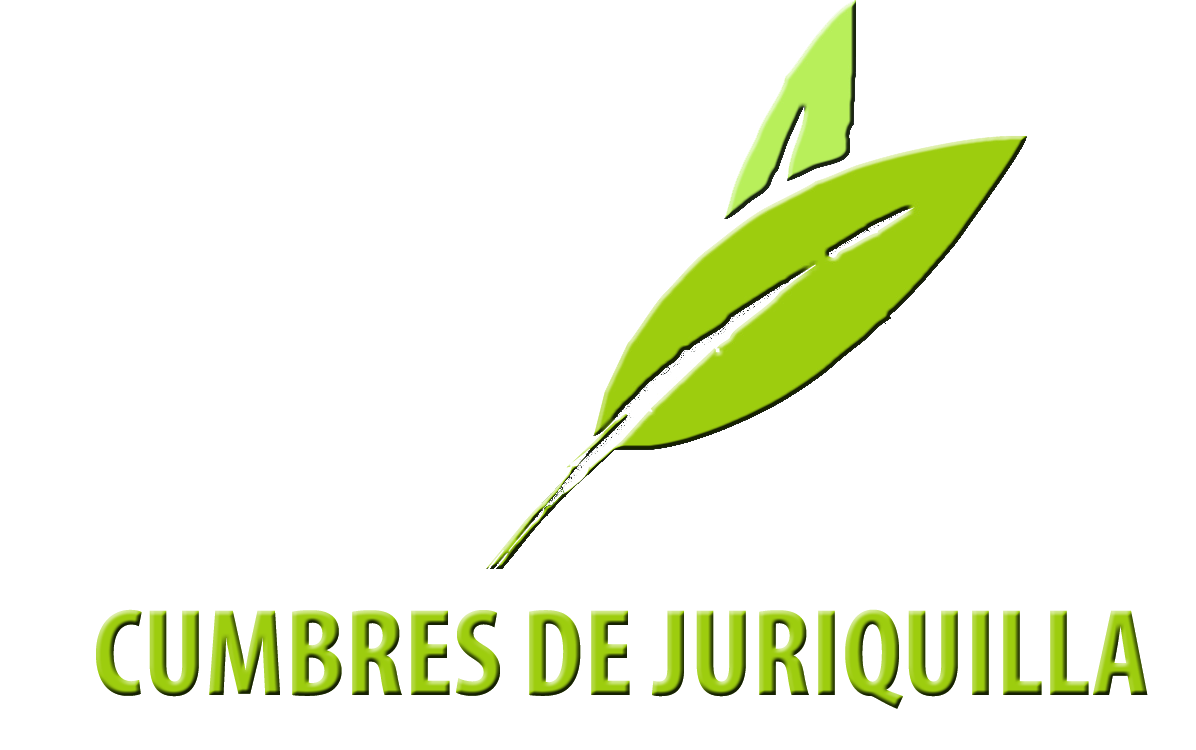
<style>
.page{position:relative;width:1196px;height:750px;background:#ffffff}
.page>*{position:absolute;margin:0}
.t1{font:125px "MyriadPro-BoldCond"}
</style>
<div class="page">
<p class="t1" style="left:96px;top:609px;width:1052px;height:100px">CUMBRES DE JURIQUILLA</p>
</div>
